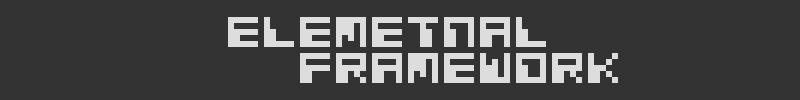
<style>
.page{position:relative;width:800px;height:100px;background:#333333}
.page>*{position:absolute;margin:0}
.t1{font:48px/36px "CosmicAlien";color:#dddddd}
</style>
<div class="page">
<p class="t1" style="left:228px;top:17px;width:390px;height:66px">ELEMETNAL<br>  framework</p>
</div>
